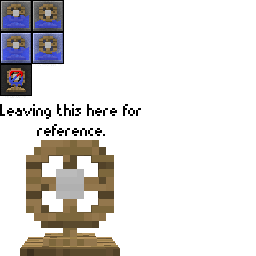
<style>
.page{position:relative;width:256px;height:256px;background:#ffffff}
.page>*{position:absolute;margin:0}
.t1{font:17px "Munro";color:#030303}
</style>
<div class="page">
<p class="t1" style="left:0px;top:104px;width:141px;height:32px;text-align:center">Leaving this here for reference.</p>
</div>
